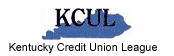
<style>
.page{position:relative;width:174px;height:56px;background:#ffffff}
.page>*{position:absolute;margin:0}
.t1{font:11px "ArialMT";color:#030000}
</style>
<div class="page">
<p class="t1" style="left:9px;top:43px;width:148px;height:11px">Kentucky Credit Union League</p>
</div>
